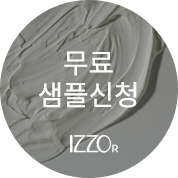
<style>
.page{position:relative;width:178px;height:178px;background:#ffffff}
.page>*{position:absolute;margin:0}
.t1{font:28px/32px "NotoSansKR-Regular";letter-spacing:-0.01em;color:#fffefe}
</style>
<div class="page">
<p class="t1" style="left:38px;top:51px;width:99px;height:57px;text-align:center">무료 <br>샘플신청</p>
</div>
